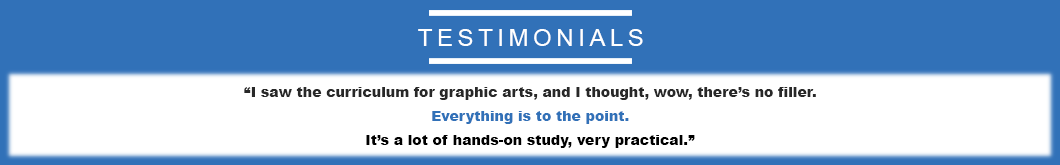
<style>
.page{position:relative;width:1060px;height:165px;background:#3171b8}
.page>*{position:absolute;margin:0}
.t1{font:24.2px "ArialMT";letter-spacing:0.19em;color:#ffffff}
.t2{font:14px/24px "Arial-Black";color:#282828}
.t3{font:14px/24px "Arial-Black";color:#3171b8}
.t4{font:14px/24px "Arial-Black";color:#000000}
</style>
<div class="page">
<p class="t1" style="left:418px;top:29px;width:225px;height:17px">TESTIMONIALS</p>
<p class="t2" style="left:244px;top:87px;width:572px;height:61px;text-align:center">“I saw the curriculum for graphic arts, and I thought, wow, there’s no filler.<br><span class="t3">Everything is to the point.<br></span><span class="t4">It’s a lot of hands-on study, very practical.”</span></p>
</div>
